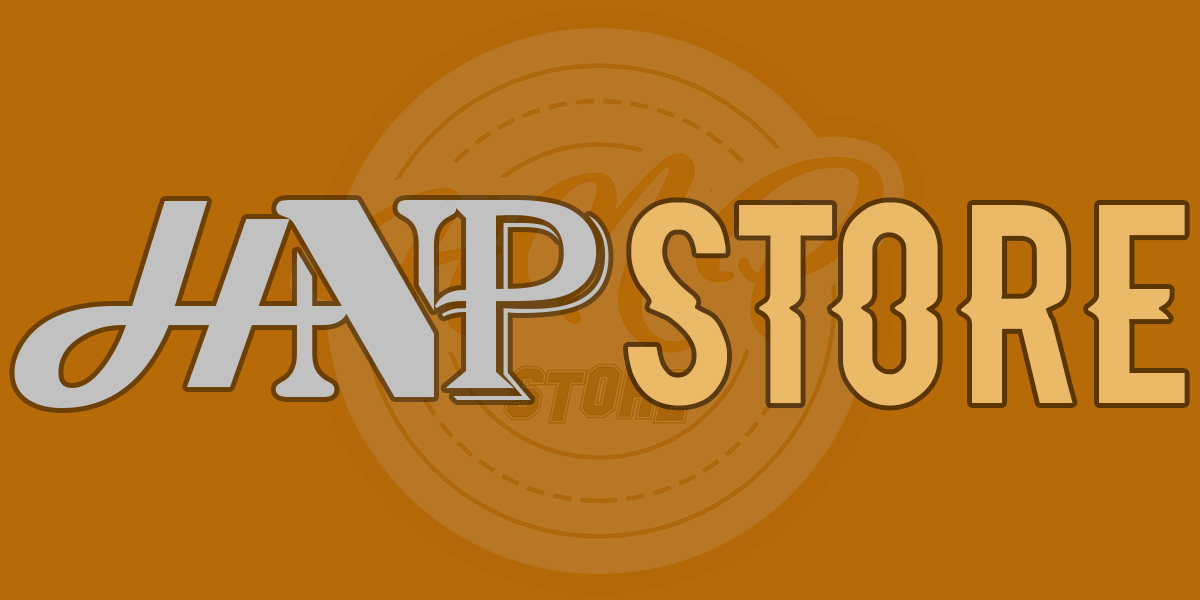
<style>
.page{position:relative;width:1200px;height:600px;background:#b66a08}
.page>*{position:absolute;margin:0}
.t1{font:244.1px "Magneto-Bold";letter-spacing:0.01em;color:#c1c1c1}
.t2{font:294.6px "Stencil";letter-spacing:0.01em;color:#c1c1c1}
.t3{font:300.2px "Algerian";letter-spacing:0.01em;color:#c1c1c1}
.t4{font:192px "Blacklisted";letter-spacing:0.01em;color:#ebba68}
.t5{font:202px "Blacklisted";letter-spacing:0.01em;color:#000000}
.t6{font:192px "Blacklisted";letter-spacing:0.01em;color:#000000}
</style>
<div class="page">
<p class="t1" style="left:14px;top:201px;width:335px;height:207px">H</p>
<p class="t2" style="left:275px;top:200px;width:182px;height:197px">N</p>
<p class="t3" style="left:435px;top:200px;width:174px;height:200px">P</p>
<p class="t4" style="left:628px;top:202px;width:310px;height:204px"><span class="t5"> </span>STO</p>
<p class="t4" style="left:961px;top:205px;width:112px;height:198px"><span class="t6"> </span>R</p>
<p class="t4" style="left:1088px;top:205px;width:97px;height:198px">E</p>
</div>
